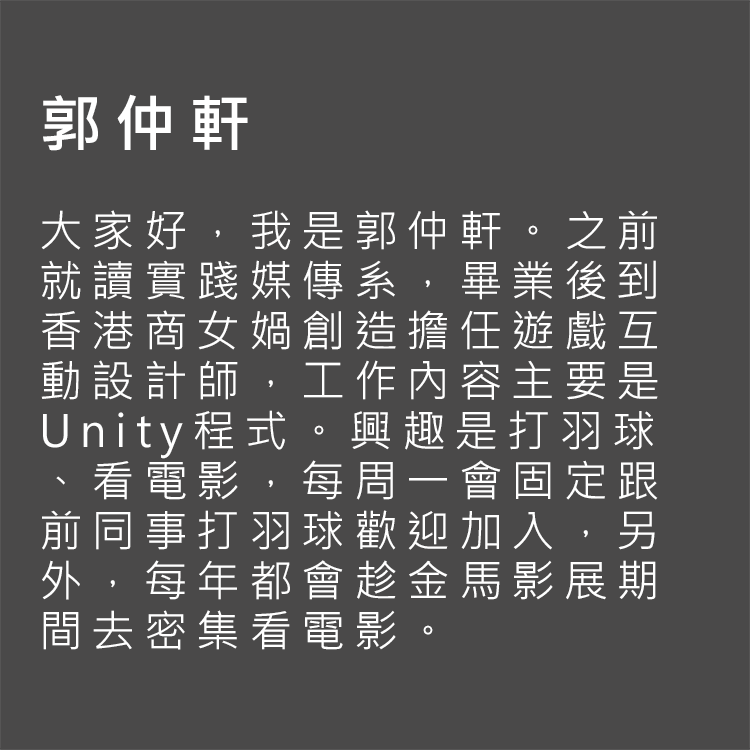
<style>
.page{position:relative;width:750px;height:750px;background:#4a4949}
.page>*{position:absolute;margin:0}
.t1{font:43.7px/50px "MicrosoftJhengHeiRegular";letter-spacing:0.2em;color:#ffffff}
.t2{font:62.5px/50px "MicrosoftJhengHeiBold";letter-spacing:0.2em;color:#ffffff}
</style>
<div class="page">
<p class="t1" style="left:41px;top:94px;width:617px;height:556px"><span class="t2">郭仲軒<br></span><br>大家好，我是郭仲軒。之前就讀實踐媒傳系，畢業後到香港商女媧創造擔任遊戲互動設計師，工作內容主要是Unity程式。興趣是打羽球、看電影，每周一會固定跟前同事打羽球歡迎加入，另外，每年都會趁金馬影展期間去密集看電影。<br><br>原文網址: 想脫魯看這！台北霞海城隍廟教你「拜月老正確流程」　這3句話必說 | ETtoday旅遊雲 | ETtoday新聞雲 https://travel.ettoday.net/article/1504431.htm#ixzz6avMGGem9<br>Follow us: @ETtodaynet on Twitter | ETtoday on Facebook</p>
</div>
